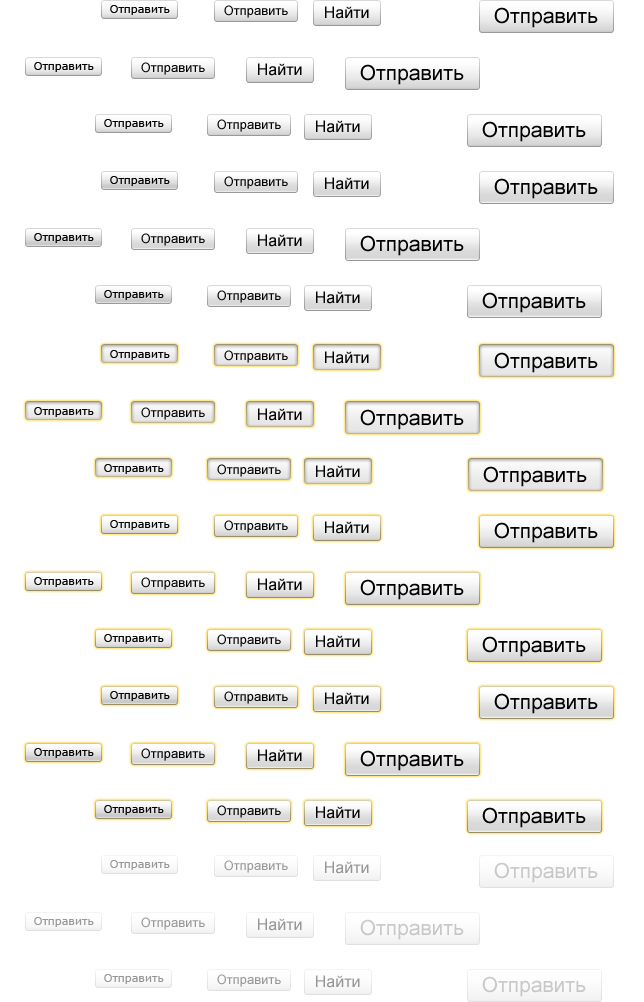
<style>
.page{position:relative;width:644px;height:1002px;background:#ffffff}
.page>*{position:absolute;margin:0}
.t1{font:11px "Verdana";color:#000000}
.t2{font:13px "ArialMT";color:#000000}
.t3{font:16px "ArialMT";color:#000000}
.t4{font:21px "ArialMT";color:#000000}
.t5{font:11px "Verdana";color:#979797}
.t6{font:13px "ArialMT";color:#969696}
.t7{font:16px "ArialMT";color:#969696}
.t8{font:21px "ArialMT";color:#c8c8c8}
</style>
<div class="page">
<p class="t1" style="left:110px;top:5px;width:60px;height:10px">Отправить</p>
<p class="t2" style="left:224px;top:5px;width:64px;height:13px">Отправить</p>
<p class="t3" style="left:325px;top:6px;width:44px;height:13px">Найти</p>
<p class="t4" style="left:494px;top:7px;width:104px;height:21px">Отправить</p>
<p class="t1" style="left:34px;top:62px;width:60px;height:10px">Отправить</p>
<p class="t2" style="left:141px;top:62px;width:64px;height:13px">Отправить</p>
<p class="t3" style="left:258px;top:63px;width:44px;height:13px">Найти</p>
<p class="t4" style="left:360px;top:64px;width:104px;height:21px">Отправить</p>
<p class="t1" style="left:104px;top:119px;width:60px;height:10px">Отправить</p>
<p class="t2" style="left:217px;top:119px;width:64px;height:13px">Отправить</p>
<p class="t3" style="left:316px;top:120px;width:44px;height:13px">Найти</p>
<p class="t4" style="left:482px;top:121px;width:104px;height:21px">Отправить</p>
<p class="t1" style="left:110px;top:176px;width:60px;height:10px">Отправить</p>
<p class="t2" style="left:224px;top:176px;width:64px;height:13px">Отправить</p>
<p class="t3" style="left:325px;top:177px;width:44px;height:13px">Найти</p>
<p class="t4" style="left:494px;top:178px;width:104px;height:21px">Отправить</p>
<p class="t1" style="left:34px;top:233px;width:60px;height:10px">Отправить</p>
<p class="t2" style="left:141px;top:233px;width:64px;height:13px">Отправить</p>
<p class="t3" style="left:258px;top:234px;width:44px;height:13px">Найти</p>
<p class="t4" style="left:360px;top:235px;width:104px;height:21px">Отправить</p>
<p class="t1" style="left:104px;top:290px;width:60px;height:10px">Отправить</p>
<p class="t2" style="left:217px;top:290px;width:64px;height:13px">Отправить</p>
<p class="t3" style="left:316px;top:291px;width:44px;height:13px">Найти</p>
<p class="t4" style="left:482px;top:292px;width:104px;height:21px">Отправить</p>
<p class="t1" style="left:110px;top:350px;width:60px;height:10px">Отправить</p>
<p class="t2" style="left:224px;top:350px;width:64px;height:13px">Отправить</p>
<p class="t3" style="left:325px;top:351px;width:44px;height:13px">Найти</p>
<p class="t4" style="left:494px;top:352px;width:104px;height:21px">Отправить</p>
<p class="t1" style="left:34px;top:407px;width:60px;height:10px">Отправить</p>
<p class="t2" style="left:141px;top:407px;width:64px;height:13px">Отправить</p>
<p class="t3" style="left:258px;top:408px;width:44px;height:13px">Найти</p>
<p class="t4" style="left:360px;top:409px;width:104px;height:21px">Отправить</p>
<p class="t1" style="left:104px;top:464px;width:60px;height:10px">Отправить</p>
<p class="t2" style="left:217px;top:464px;width:64px;height:13px">Отправить</p>
<p class="t3" style="left:316px;top:465px;width:44px;height:13px">Найти</p>
<p class="t4" style="left:483px;top:466px;width:104px;height:21px">Отправить</p>
<p class="t1" style="left:110px;top:520px;width:60px;height:10px">Отправить</p>
<p class="t2" style="left:224px;top:520px;width:64px;height:13px">Отправить</p>
<p class="t3" style="left:325px;top:521px;width:44px;height:13px">Найти</p>
<p class="t1" style="left:34px;top:577px;width:60px;height:10px">Отправить</p>
<p class="t2" style="left:141px;top:577px;width:64px;height:13px">Отправить</p>
<p class="t3" style="left:258px;top:578px;width:44px;height:13px">Найти</p>
<p class="t1" style="left:104px;top:634px;width:60px;height:10px">Отправить</p>
<p class="t2" style="left:217px;top:634px;width:64px;height:13px">Отправить</p>
<p class="t3" style="left:316px;top:635px;width:44px;height:13px">Найти</p>
<p class="t1" style="left:110px;top:691px;width:60px;height:10px">Отправить</p>
<p class="t2" style="left:224px;top:691px;width:64px;height:13px">Отправить</p>
<p class="t3" style="left:325px;top:692px;width:44px;height:13px">Найти</p>
<p class="t4" style="left:494px;top:693px;width:104px;height:21px">Отправить</p>
<p class="t1" style="left:34px;top:748px;width:60px;height:10px">Отправить</p>
<p class="t2" style="left:141px;top:748px;width:64px;height:13px">Отправить</p>
<p class="t3" style="left:258px;top:749px;width:44px;height:13px">Найти</p>
<p class="t4" style="left:360px;top:750px;width:104px;height:21px">Отправить</p>
<p class="t1" style="left:104px;top:805px;width:60px;height:10px">Отправить</p>
<p class="t2" style="left:217px;top:805px;width:64px;height:13px">Отправить</p>
<p class="t3" style="left:316px;top:806px;width:44px;height:13px">Найти</p>
<p class="t4" style="left:482px;top:807px;width:104px;height:21px">Отправить</p>
<p class="t5" style="left:110px;top:860px;width:60px;height:10px">Отправить</p>
<p class="t6" style="left:224px;top:860px;width:64px;height:13px">Отправить</p>
<p class="t7" style="left:325px;top:861px;width:44px;height:13px">Найти</p>
<p class="t8" style="left:494px;top:862px;width:104px;height:21px">Отправить</p>
<p class="t5" style="left:34px;top:917px;width:60px;height:10px">Отправить</p>
<p class="t6" style="left:141px;top:917px;width:64px;height:13px">Отправить</p>
<p class="t7" style="left:258px;top:918px;width:44px;height:13px">Найти</p>
<p class="t8" style="left:360px;top:919px;width:104px;height:21px">Отправить</p>
<p class="t5" style="left:104px;top:974px;width:60px;height:10px">Отправить</p>
<p class="t6" style="left:217px;top:974px;width:64px;height:13px">Отправить</p>
<p class="t7" style="left:316px;top:975px;width:44px;height:13px">Найти</p>
<p class="t8" style="left:482px;top:976px;width:104px;height:21px">Отправить</p>
</div>
